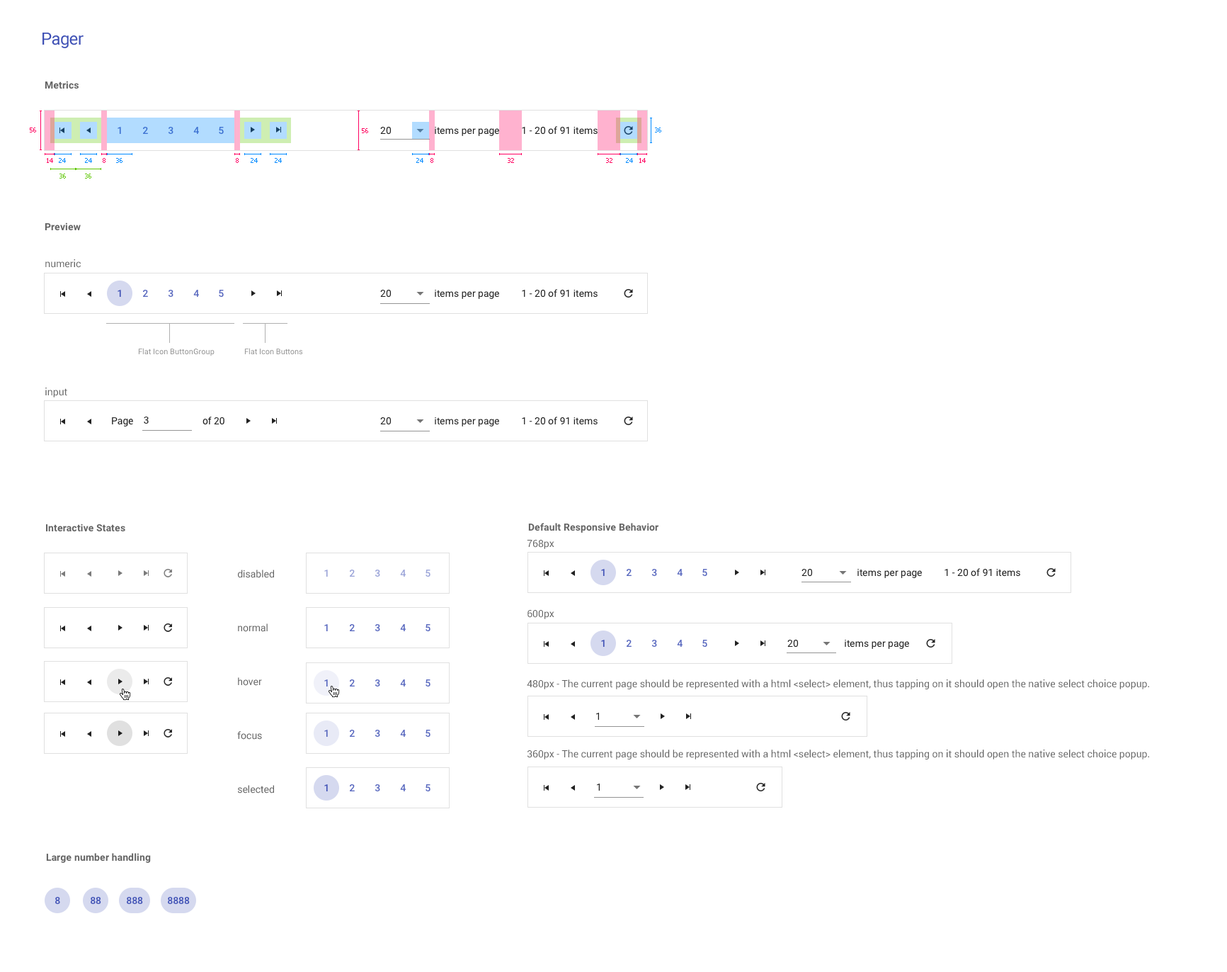
<style>
.page{position:relative;width:1227px;height:972px;background:#ffffff}
.page>*{position:absolute;margin:0}
.t1{font:17px "Roboto-Regular";letter-spacing:-0.025em;color:#3f51b5}
.t2{font:9.9px "Roboto-Bold";letter-spacing:0.01em;color:#656565}
.t3{font:6.4px "Tahoma";color:#ff0061}
.t4{font:9.9px "Roboto-Medium";color:#3d72d2}
.t5{font:6.4px "Tahoma";color:#ff0060}
.t6{font:9.9px "Roboto-Regular";color:#212121}
.t7{font:6.4px "Tahoma";color:#008aff}
.t8{font:6.4px "Tahoma";color:#5ec600}
.t9{font:9.9px/128.2px "Roboto-Regular";color:#656565}
.t10{font:9.9px "Roboto-Medium";color:#3f51b5}
.t11{font:9.9px "Roboto-Medium";color:#5868bf}
.t12{font:7.8px "Roboto-Regular";color:#939393}
.t13{font:9.9px/70.1px "Roboto-Regular";color:#656565}
.t14{font:9.9px/53.8px "Roboto-Regular";color:#656565}
.t15{font:9.9px "Roboto-Medium";color:#9ba4d8}
</style>
<div class="page">
<p class="t1" style="left:42px;top:33px;width:42px;height:15px">Pager</p>
<p class="t2" style="left:45px;top:81px;width:34px;height:8px">Metrics</p>
<p class="t3" style="left:30px;top:127px;width:6px;height:5px">56</p>
<p class="t4" style="left:118px;top:127px;width:3px;height:7px">1</p>
<p class="t4" style="left:143px;top:127px;width:5px;height:7px">2</p>
<p class="t4" style="left:168px;top:127px;width:6px;height:8px">3</p>
<p class="t4" style="left:193px;top:127px;width:6px;height:7px">4</p>
<p class="t4" style="left:219px;top:127px;width:5px;height:8px">5</p>
<p class="t5" style="left:362px;top:128px;width:6px;height:5px">56</p>
<p class="t6" style="left:380px;top:127px;width:12px;height:8px">20</p>
<p class="t6" style="left:435px;top:127px;width:64px;height:9px">items per page</p>
<p class="t6" style="left:522px;top:126px;width:76px;height:9px">1 - 20 of 91 items</p>
<p class="t7" style="left:655px;top:127px;width:6px;height:5px">36</p>
<p class="t3" style="left:47px;top:158px;width:6px;height:5px">14</p>
<p class="t7" style="left:59px;top:158px;width:7px;height:5px">24</p>
<p class="t7" style="left:85px;top:158px;width:7px;height:5px">24</p>
<p class="t3" style="left:103px;top:158px;width:3px;height:5px">8</p>
<p class="t7" style="left:116px;top:158px;width:7px;height:5px">36</p>
<p class="t3" style="left:236px;top:158px;width:3px;height:5px">8</p>
<p class="t7" style="left:251px;top:158px;width:7px;height:5px">24</p>
<p class="t7" style="left:275px;top:158px;width:7px;height:5px">24</p>
<p class="t7" style="left:416px;top:158px;width:7px;height:5px">24</p>
<p class="t3" style="left:431px;top:158px;width:2px;height:5px">8</p>
<p class="t3" style="left:508px;top:158px;width:6px;height:5px">32</p>
<p class="t3" style="left:606px;top:158px;width:7px;height:5px">32</p>
<p class="t7" style="left:626px;top:158px;width:7px;height:5px">24</p>
<p class="t3" style="left:639px;top:158px;width:7px;height:5px">14</p>
<p class="t8" style="left:59px;top:174px;width:7px;height:4px">36</p>
<p class="t8" style="left:85px;top:174px;width:6px;height:4px">36</p>
<p class="t2" style="left:45px;top:222px;width:36px;height:9px">Preview</p>
<p class="t9" style="left:45px;top:259px;width:36px;height:138px">numeric<br>input</p>
<p class="t10" style="left:118px;top:290px;width:3px;height:7px">1</p>
<p class="t11" style="left:143px;top:290px;width:5px;height:7px">2</p>
<p class="t11" style="left:168px;top:290px;width:6px;height:7px">3</p>
<p class="t11" style="left:193px;top:290px;width:6px;height:7px">4</p>
<p class="t11" style="left:219px;top:290px;width:5px;height:7px">5</p>
<p class="t6" style="left:380px;top:290px;width:12px;height:7px">20</p>
<p class="t6" style="left:435px;top:290px;width:64px;height:9px">items per page</p>
<p class="t6" style="left:522px;top:289px;width:76px;height:8px">1 - 20 of 91 items</p>
<p class="t12" style="left:138px;top:348px;width:77px;height:8px">Flat Icon ButtonGroup</p>
<p class="t12" style="left:244px;top:348px;width:59px;height:7px">Flat Icon Buttons</p>
<p class="t6" style="left:112px;top:417px;width:21px;height:9px">Page</p>
<p class="t6" style="left:144px;top:416px;width:5px;height:8px">3</p>
<p class="t6" style="left:203px;top:416px;width:21px;height:9px">of 20</p>
<p class="t6" style="left:380px;top:417px;width:12px;height:8px">20</p>
<p class="t6" style="left:435px;top:417px;width:64px;height:9px">items per page</p>
<p class="t6" style="left:522px;top:416px;width:76px;height:9px">1 - 20 of 91 items</p>
<p class="t2" style="left:46px;top:523px;width:79px;height:9px">Interactive States</p>
<p class="t2" style="left:528px;top:523px;width:131px;height:10px">Default Responsive Behavior</p>
<p class="t13" style="left:527px;top:540px;width:622px;height:219px">768px<br>600px<br>480px - The current page should be represented with a html &lt;select&gt; element, thus tapping on it should open the native select choice popup.<br>360px - The current page should be represented with a html &lt;select&gt; element, thus tapping on it should open the native select choice popup.</p>
<p class="t14" style="left:237px;top:569px;width:37px;height:224px">disabled<br>normal<br>hover<br>focus<br>selected</p>
<p class="t15" style="left:324px;top:569px;width:4px;height:7px">1</p>
<p class="t15" style="left:350px;top:569px;width:5px;height:7px">2</p>
<p class="t15" style="left:375px;top:569px;width:5px;height:8px">3</p>
<p class="t15" style="left:400px;top:569px;width:6px;height:7px">4</p>
<p class="t15" style="left:426px;top:569px;width:5px;height:8px">5</p>
<p class="t10" style="left:601px;top:569px;width:4px;height:7px">1</p>
<p class="t11" style="left:627px;top:569px;width:5px;height:7px">2</p>
<p class="t11" style="left:652px;top:569px;width:5px;height:7px">3</p>
<p class="t11" style="left:677px;top:569px;width:6px;height:7px">4</p>
<p class="t11" style="left:703px;top:569px;width:4px;height:7px">5</p>
<p class="t6" style="left:802px;top:569px;width:11px;height:7px">20</p>
<p class="t6" style="left:858px;top:569px;width:64px;height:9px">items per page</p>
<p class="t6" style="left:945px;top:568px;width:75px;height:8px">1 - 20 of 91 items</p>
<p class="t11" style="left:324px;top:624px;width:4px;height:7px">1</p>
<p class="t11" style="left:350px;top:624px;width:5px;height:7px">2</p>
<p class="t11" style="left:375px;top:624px;width:5px;height:8px">3</p>
<p class="t11" style="left:400px;top:624px;width:6px;height:7px">4</p>
<p class="t11" style="left:426px;top:624px;width:5px;height:8px">5</p>
<p class="t10" style="left:601px;top:639px;width:4px;height:8px">1</p>
<p class="t11" style="left:627px;top:639px;width:5px;height:8px">2</p>
<p class="t11" style="left:652px;top:639px;width:5px;height:8px">3</p>
<p class="t11" style="left:677px;top:639px;width:6px;height:8px">4</p>
<p class="t11" style="left:703px;top:639px;width:4px;height:8px">5</p>
<p class="t6" style="left:787px;top:639px;width:12px;height:8px">20</p>
<p class="t6" style="left:845px;top:639px;width:64px;height:10px">items per page</p>
<p class="t11" style="left:324px;top:679px;width:4px;height:7px">1</p>
<p class="t11" style="left:350px;top:679px;width:5px;height:7px">2</p>
<p class="t11" style="left:375px;top:679px;width:5px;height:8px">3</p>
<p class="t11" style="left:400px;top:679px;width:6px;height:7px">4</p>
<p class="t11" style="left:426px;top:679px;width:5px;height:8px">5</p>
<p class="t6" style="left:596px;top:712px;width:3px;height:8px">1</p>
<p class="t10" style="left:324px;top:729px;width:4px;height:8px;opacity:0.87">1</p>
<p class="t11" style="left:350px;top:729px;width:5px;height:8px">2</p>
<p class="t11" style="left:375px;top:729px;width:5px;height:8px">3</p>
<p class="t11" style="left:400px;top:729px;width:6px;height:8px">4</p>
<p class="t11" style="left:426px;top:729px;width:5px;height:8px">5</p>
<p class="t10" style="left:324px;top:784px;width:4px;height:7px">1</p>
<p class="t11" style="left:350px;top:784px;width:5px;height:7px">2</p>
<p class="t11" style="left:375px;top:784px;width:5px;height:8px">3</p>
<p class="t11" style="left:400px;top:784px;width:6px;height:7px">4</p>
<p class="t11" style="left:426px;top:784px;width:5px;height:8px">5</p>
<p class="t6" style="left:597px;top:783px;width:3px;height:7px">1</p>
<p class="t2" style="left:46px;top:853px;width:105px;height:10px">Large number handling</p>
<p class="t10" style="left:55px;top:897px;width:5px;height:7px">8</p>
<p class="t10" style="left:91px;top:897px;width:10px;height:7px">88</p>
<p class="t10" style="left:127px;top:897px;width:16px;height:7px">888</p>
<p class="t10" style="left:168px;top:897px;width:22px;height:7px">8888</p>
</div>
